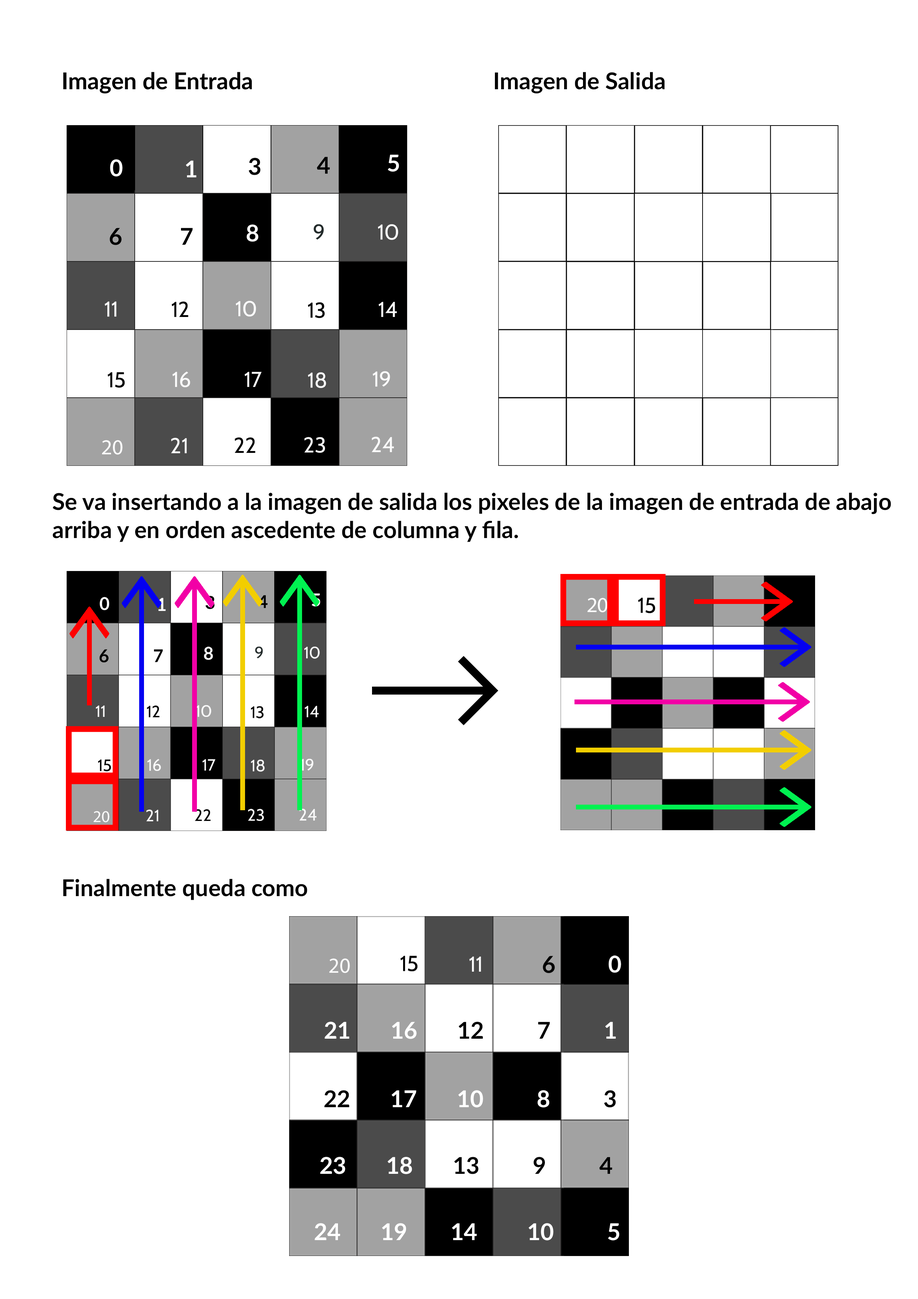
<style>
.page{position:relative;width:918px;height:1299px;background:#ffffff}
.page>*{position:absolute;margin:0}
.t1{font:23.2px "Lato-Bold";color:#000000}
.t2{font:23.2px "Lato-Bold";color:#ffffff}
.t3{font:21.6px "Cabin-Regular";color:#232b2b}
.t4{font:21.6px "Cabin-Regular";color:#fbfbfb}
.t5{font:21.6px "Cabin-Regular";color:#000000}
.t6{font:21.6px "MyriadPro-Regular";color:#fbfbfb}
.t7{font:17.7px "Lato-Bold"}
.t8{font:17.7px "Lato-Bold";color:#ffffff}
.t9{font:17.7px "Lato-Bold";color:#000000}
.t10{font:16.5px "Cabin-Regular";color:#232b2b}
.t11{font:16.5px "Cabin-Regular";color:#fbfbfb}
.t12{font:16.5px "Cabin-Regular";color:#000000}
.t13{font:16.5px "MyriadPro-Regular";color:#fbfbfb}
.t14{font:23.1px "Lato-Bold";color:#000000}
.t15{font:23.1px "Lato-Bold";color:#ffffff}
</style>
<div class="page">
<p class="t1" style="left:63px;top:72px;width:189px;height:22px">Imagen de Entrada</p>
<p class="t1" style="left:495px;top:72px;width:170px;height:22px">Imagen de Salida</p>
<p class="t2" style="left:110px;top:159px;width:13px;height:18px">0</p>
<p class="t2" style="left:186px;top:160px;width:11px;height:17px">1</p>
<p class="t1" style="left:249px;top:158px;width:12px;height:17px">3</p>
<p class="t1" style="left:317px;top:157px;width:13px;height:17px">4</p>
<p class="t2" style="left:388px;top:154px;width:11px;height:18px">5</p>
<p class="t1" style="left:110px;top:228px;width:12px;height:17px">6</p>
<p class="t1" style="left:181px;top:228px;width:12px;height:17px">7</p>
<p class="t2" style="left:247px;top:224px;width:11px;height:18px">8</p>
<p class="t3" style="left:314px;top:224px;width:10px;height:16px">9</p>
<p class="t4" style="left:378px;top:224px;width:20px;height:16px">10</p>
<p class="t4" style="left:105px;top:301px;width:12px;height:16px">11</p>
<p class="t5" style="left:172px;top:301px;width:16px;height:16px">12</p>
<p class="t4" style="left:236px;top:301px;width:20px;height:16px">10</p>
<p class="t5" style="left:308px;top:302px;width:17px;height:16px">13</p>
<p class="t4" style="left:379px;top:302px;width:18px;height:15px">14</p>
<p class="t5" style="left:108px;top:372px;width:17px;height:16px">15</p>
<p class="t4" style="left:173px;top:371px;width:17px;height:16px">16</p>
<p class="t4" style="left:245px;top:372px;width:17px;height:15px">17</p>
<p class="t4" style="left:308px;top:372px;width:18px;height:16px">18</p>
<p class="t4" style="left:373px;top:371px;width:17px;height:16px">19</p>
<p class="t4" style="left:171px;top:438px;width:16px;height:15px">21</p>
<p class="t5" style="left:235px;top:437px;width:20px;height:16px">22</p>
<p class="t4" style="left:304px;top:437px;width:21px;height:16px">23</p>
<p class="t4" style="left:372px;top:436px;width:22px;height:16px">24</p>
<p class="t6" style="left:102px;top:440px;width:21px;height:15px">20</p>
<p class="t1" style="left:53px;top:492px;width:838px;height:50px">Se va insertando a la imagen de salida los pixeles de la imagen de entrada de abajo arriba y en orden ascedente de columna y fila.</p>
<p class="t7" style="left:312px;top:593px;width:8px;height:13px">5</p>
<p class="t8" style="left:100px;top:597px;width:9px;height:13px">0</p>
<p class="t8" style="left:158px;top:598px;width:8px;height:13px">1</p>
<p class="t7" style="left:205px;top:596px;width:10px;height:13px">3</p>
<p class="t9" style="left:258px;top:595px;width:10px;height:13px">4</p>
<p class="t6" style="left:588px;top:598px;width:20px;height:14px">20</p>
<p class="t5" style="left:638px;top:598px;width:17px;height:15px">15</p>
<p class="t9" style="left:100px;top:649px;width:9px;height:13px">6</p>
<p class="t9" style="left:154px;top:649px;width:9px;height:13px">7</p>
<p class="t8" style="left:204px;top:646px;width:9px;height:14px">8</p>
<p class="t10" style="left:255px;top:646px;width:8px;height:12px">9</p>
<p class="t11" style="left:304px;top:646px;width:16px;height:13px">10</p>
<p class="t11" style="left:96px;top:705px;width:9px;height:12px">11</p>
<p class="t12" style="left:147px;top:705px;width:13px;height:12px">12</p>
<p class="t11" style="left:196px;top:705px;width:15px;height:12px">10</p>
<p class="t12" style="left:251px;top:706px;width:13px;height:12px">13</p>
<p class="t11" style="left:305px;top:706px;width:14px;height:11px">14</p>
<p class="t12" style="left:98px;top:759px;width:13px;height:12px">15</p>
<p class="t11" style="left:147px;top:759px;width:14px;height:12px">16</p>
<p class="t11" style="left:203px;top:759px;width:12px;height:11px">17</p>
<p class="t11" style="left:251px;top:759px;width:14px;height:13px">18</p>
<p class="t11" style="left:300px;top:759px;width:14px;height:11px">19</p>
<p class="t11" style="left:146px;top:809px;width:12px;height:12px">21</p>
<p class="t12" style="left:195px;top:809px;width:16px;height:12px">22</p>
<p class="t11" style="left:248px;top:809px;width:16px;height:12px">23</p>
<p class="t11" style="left:300px;top:809px;width:17px;height:11px">24</p>
<p class="t13" style="left:94px;top:811px;width:16px;height:11px">20</p>
<p class="t1" style="left:63px;top:879px;width:244px;height:21px">Finalmente queda como</p>
<p class="t6" style="left:329px;top:958px;width:21px;height:15px">20</p>
<p class="t5" style="left:401px;top:956px;width:17px;height:15px">15</p>
<p class="t4" style="left:469px;top:956px;width:12px;height:15px">11</p>
<p class="t14" style="left:543px;top:956px;width:12px;height:17px">6</p>
<p class="t15" style="left:609px;top:955px;width:12px;height:18px">0</p>
<p class="t2" style="left:315px;top:1223px;width:304px;height:17px">24   19     14    10    5</p>
</div>
